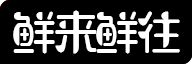
<style>
.page{position:relative;width:192px;height:64px;background:#000000}
.page>*{position:absolute;margin:0}
.t1{font:41.7px "MFKeKe_Noncommercial-Regular";color:#ffffff}
</style>
<div class="page">
<p class="t1" style="left:13px;top:10px;width:167px;height:44px">鲜来鲜往</p>
</div>
